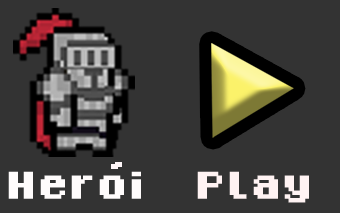
<style>
.page{position:relative;width:340px;height:213px;background:#333333}
.page>*{position:absolute;margin:0}
.t1{font:60px "8-Bit-Madness";color:#fffcfc;font-weight:bold}
.t2{font:60px "8-Bit-Madness";color:#fff3f3;font-weight:bold}
</style>
<div class="page">
<p class="t1" style="left:8px;top:171px;width:133px;height:28px">Heroi</p>
<p class="t2" style="left:197px;top:171px;width:112px;height:32px">Play</p>
</div>
